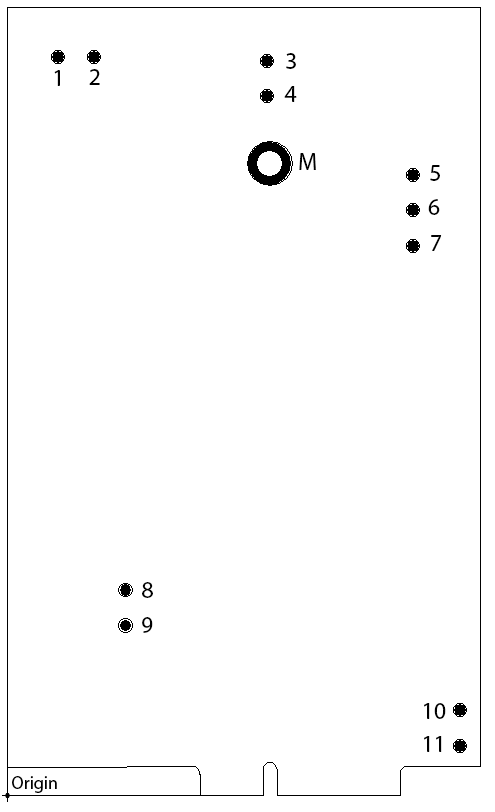
<style>
.page{position:relative;width:495px;height:812px;background:#ffffff}
.page>*{position:absolute;margin:0}
.t1{font:24px "MyriadPro-Regular";color:#000000}
.t2{font:18px "MyriadPro-Regular";color:#000000}
</style>
<div class="page">
<p class="t1" style="left:286px;top:53px;width:10px;height:16px">3</p>
<p class="t1" style="left:54px;top:70px;width:6px;height:16px">1</p>
<p class="t1" style="left:89px;top:69px;width:11px;height:16px">2</p>
<p class="t1" style="left:284px;top:86px;width:13px;height:16px">4</p>
<p class="t1" style="left:299px;top:153px;width:17px;height:17px">M</p>
<p class="t1" style="left:430px;top:165px;width:10px;height:16px">5</p>
<p class="t1" style="left:428px;top:199px;width:12px;height:16px">6</p>
<p class="t1" style="left:431px;top:235px;width:11px;height:16px">7</p>
<p class="t1" style="left:142px;top:582px;width:11px;height:16px">8</p>
<p class="t1" style="left:142px;top:617px;width:11px;height:16px">9</p>
<p class="t1" style="left:424px;top:703px;width:22px;height:16px">10</p>
<p class="t1" style="left:424px;top:736px;width:18px;height:16px">11</p>
<p class="t2" style="left:12px;top:776px;width:45px;height:17px">Origin</p>
</div>
